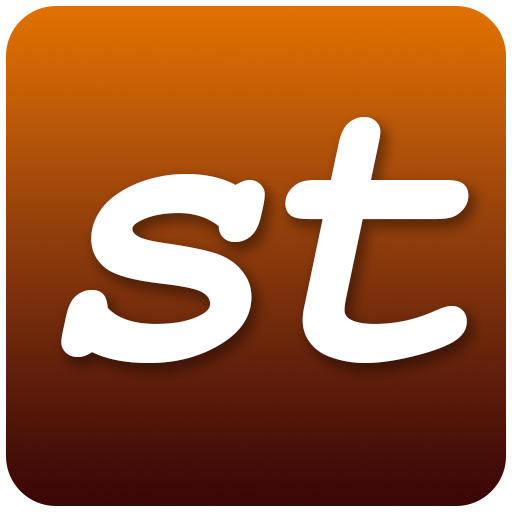
<style>
.page{position:relative;width:512px;height:512px;background:#ffffff}
.page>*{position:absolute;margin:0}
.t1{font:400px "CourierNewPS-BoldItalicMT";letter-spacing:-0.1em;color:#ffffff}
</style>
<div class="page">
<p class="t1" style="left:61px;top:117px;width:408px;height:246px">st</p>
</div>
